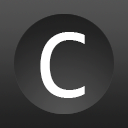
<style>
.page{position:relative;width:128px;height:128px}
.page>*{position:absolute;margin:0}
.t1{font:100px "Consolas";color:#ffffff}
</style>
<div class="page">
<p class="t1" style="left:40px;top:32px;width:45px;height:66px">C</p>
</div>
